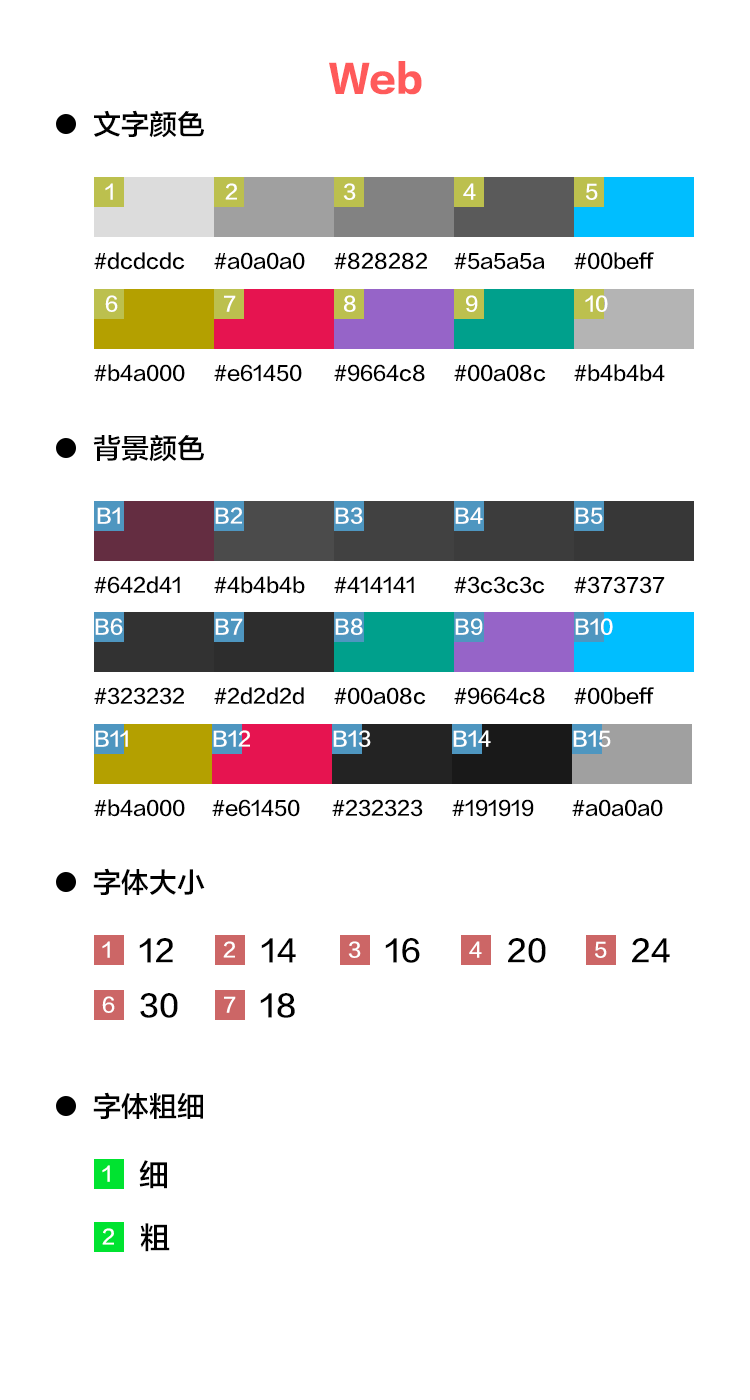
<style>
.page{position:relative;width:750px;height:1400px;background:#ffffff}
.page>*{position:absolute;margin:0}
.t1{font:36px "FZLTTHK--GBK1-0";color:#ff5a5a}
.t2{font:28px "FZLTZHK--GBK1-0";color:#000000}
.t3{font:20px "FZLTZHK--GBK1-0";color:#ffffff}
.t4{font:20px "FZLTZHK--GBK1-0";color:#000000}
.t5{font:30px "FZLTZHK--GBK1-0";color:#000000}
</style>
<div class="page">
<p class="t1" style="left:329px;top:61px;width:93px;height:34px">Web</p>
<p class="t2" style="left:94px;top:110px;width:110px;height:28px">文字颜色</p>
<p class="t3" style="left:105px;top:183px;width:8px;height:17px">1</p>
<p class="t3" style="left:225px;top:183px;width:12px;height:17px">2</p>
<p class="t3" style="left:343px;top:183px;width:13px;height:17px">3</p>
<p class="t3" style="left:463px;top:183px;width:13px;height:17px">4</p>
<p class="t3" style="left:586px;top:183px;width:12px;height:17px">5</p>
<p class="t4" style="left:94px;top:252px;width:91px;height:18px">#dcdcdc</p>
<p class="t4" style="left:214px;top:252px;width:91px;height:18px">#a0a0a0</p>
<p class="t4" style="left:334px;top:252px;width:93px;height:18px">#828282</p>
<p class="t4" style="left:454px;top:253px;width:91px;height:17px">#5a5a5a</p>
<p class="t4" style="left:574px;top:252px;width:80px;height:18px">#00beff</p>
<p class="t3" style="left:105px;top:295px;width:13px;height:17px">6</p>
<p class="t3" style="left:224px;top:295px;width:12px;height:17px">7</p>
<p class="t3" style="left:344px;top:295px;width:12px;height:17px">8</p>
<p class="t3" style="left:466px;top:295px;width:12px;height:17px">9</p>
<p class="t3" style="left:585px;top:295px;width:23px;height:17px">10</p>
<p class="t4" style="left:94px;top:364px;width:91px;height:18px">#b4a000</p>
<p class="t4" style="left:214px;top:364px;width:88px;height:18px">#e61450</p>
<p class="t4" style="left:334px;top:364px;width:91px;height:18px">#9664c8</p>
<p class="t4" style="left:454px;top:364px;width:92px;height:18px">#00a08c</p>
<p class="t4" style="left:574px;top:364px;width:91px;height:18px">#b4b4b4</p>
<p class="t2" style="left:93px;top:435px;width:111px;height:27px">背景颜色</p>
<p class="t3" style="left:97px;top:507px;width:23px;height:17px">B1</p>
<p class="t3" style="left:215px;top:507px;width:27px;height:17px">B2</p>
<p class="t3" style="left:335px;top:507px;width:28px;height:17px">B3</p>
<p class="t3" style="left:455px;top:507px;width:28px;height:17px">B4</p>
<p class="t3" style="left:575px;top:507px;width:28px;height:17px">B5</p>
<p class="t4" style="left:94px;top:576px;width:86px;height:18px">#642d41</p>
<p class="t4" style="left:214px;top:576px;width:91px;height:18px">#4b4b4b</p>
<p class="t4" style="left:334px;top:576px;width:80px;height:17px">#414141</p>
<p class="t4" style="left:454px;top:576px;width:91px;height:18px">#3c3c3c</p>
<p class="t4" style="left:574px;top:576px;width:91px;height:18px">#373737</p>
<p class="t3" style="left:95px;top:618px;width:28px;height:17px">B6</p>
<p class="t3" style="left:215px;top:618px;width:28px;height:17px">B7</p>
<p class="t3" style="left:335px;top:618px;width:28px;height:17px">B8</p>
<p class="t3" style="left:455px;top:618px;width:28px;height:17px">B9</p>
<p class="t3" style="left:575px;top:618px;width:38px;height:17px">B10</p>
<p class="t4" style="left:94px;top:687px;width:90px;height:18px">#323232</p>
<p class="t4" style="left:214px;top:687px;width:90px;height:18px">#2d2d2d</p>
<p class="t4" style="left:334px;top:687px;width:92px;height:18px">#00a08c</p>
<p class="t4" style="left:454px;top:687px;width:91px;height:18px">#9664c8</p>
<p class="t4" style="left:574px;top:687px;width:80px;height:18px">#00beff</p>
<p class="t3" style="left:95px;top:730px;width:33px;height:17px">B11</p>
<p class="t3" style="left:213px;top:730px;width:37px;height:17px">B12</p>
<p class="t3" style="left:333px;top:730px;width:38px;height:17px">B13</p>
<p class="t3" style="left:453px;top:730px;width:38px;height:17px">B14</p>
<p class="t3" style="left:573px;top:730px;width:38px;height:17px">B15</p>
<p class="t4" style="left:94px;top:799px;width:91px;height:18px">#b4a000</p>
<p class="t4" style="left:212px;top:799px;width:88px;height:18px">#e61450</p>
<p class="t4" style="left:332px;top:799px;width:91px;height:18px">#232323</p>
<p class="t4" style="left:452px;top:799px;width:82px;height:18px">#191919</p>
<p class="t4" style="left:572px;top:799px;width:91px;height:18px">#a0a0a0</p>
<p class="t2" style="left:93px;top:868px;width:112px;height:27px">字体大小</p>
<p class="t3" style="left:102px;top:941px;width:8px;height:17px">1</p>
<p class="t5" style="left:139px;top:938px;width:34px;height:25px">12</p>
<p class="t3" style="left:223px;top:941px;width:12px;height:17px">2</p>
<p class="t5" style="left:261px;top:938px;width:35px;height:25px">14</p>
<p class="t3" style="left:348px;top:941px;width:13px;height:17px">3</p>
<p class="t3" style="left:348px;top:941px;width:13px;height:17px">3</p>
<p class="t5" style="left:385px;top:938px;width:35px;height:25px">16</p>
<p class="t3" style="left:469px;top:941px;width:13px;height:17px">4</p>
<p class="t5" style="left:508px;top:938px;width:38px;height:25px">20</p>
<p class="t3" style="left:595px;top:941px;width:12px;height:17px">5</p>
<p class="t5" style="left:632px;top:938px;width:38px;height:25px">24</p>
<p class="t3" style="left:102px;top:996px;width:13px;height:17px">6</p>
<p class="t5" style="left:140px;top:993px;width:38px;height:25px">30</p>
<p class="t3" style="left:224px;top:996px;width:12px;height:17px">7</p>
<p class="t5" style="left:260px;top:993px;width:35px;height:25px">18</p>
<p class="t2" style="left:93px;top:1092px;width:110px;height:27px">字体粗细</p>
<p class="t3" style="left:102px;top:1165px;width:8px;height:17px">1</p>
<p class="t5" style="left:139px;top:1160px;width:28px;height:29px">细</p>
<p class="t3" style="left:102px;top:1228px;width:12px;height:17px">2</p>
<p class="t5" style="left:140px;top:1223px;width:30px;height:29px">粗</p>
</div>
